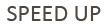
<style>
.page{position:relative;width:108px;height:27px;background:#ffffff}
.page>*{position:absolute;margin:0}
.t1{font:24px "Calibri";color:#4d4843}
</style>
<div class="page">
<p class="t1" style="left:7px;top:6px;width:94px;height:15px">SPEED UP</p>
</div>
